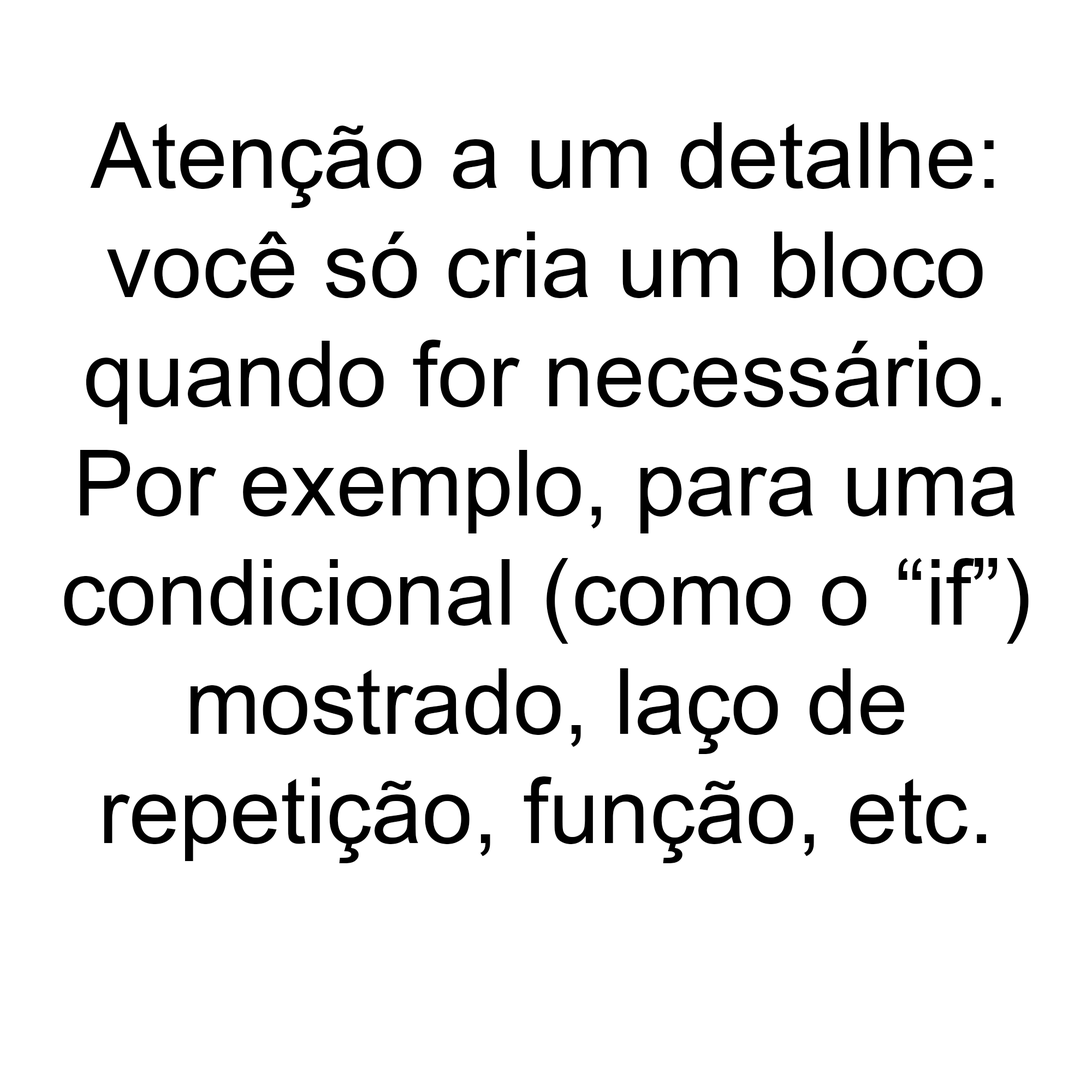
<style>
.page{position:relative;width:1092px;height:1092px;background:#ffffff}
.page>*{position:absolute;margin:0}
.t1{font:91px "ArialMT";color:#000000}
</style>
<div class="page">
<p class="t1" style="left:64px;top:122px;width:965px;height:741px;text-align:center">Atenção a um detalhe:<br>você só cria um bloco<br>quando for necessário.<br>Por exemplo, para uma<br>condicional (como o “if”)<br>mostrado, laço de<br>repetição, função, etc.</p>
</div>
